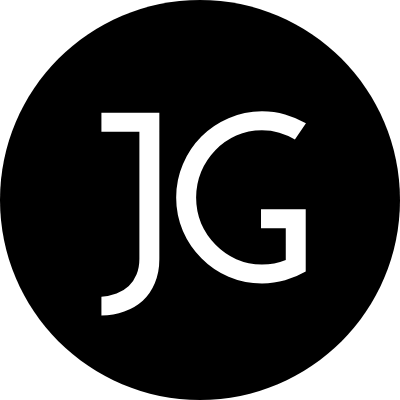
<style>
.page{position:relative;width:400px;height:400px;background:#000000}
.page>*{position:absolute;margin:0}
.t1{font:240.4px "JosefinSlab-Bold";color:#ffffff}
</style>
<div class="page">
<p class="t1" style="left:101px;top:111px;width:205px;height:205px">JG</p>
</div>
